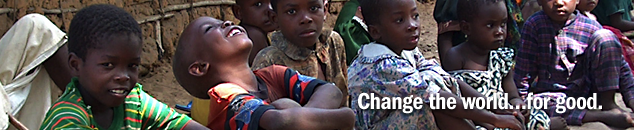
<style>
.page{position:relative;width:634px;height:130px}
.page>*{position:absolute;margin:0}
.t1{font:24px "FranklinGotCdITC-Demi";letter-spacing:-0.025em;color:#ffffff}
</style>
<div class="page">
<p class="t1" style="left:358px;top:92px;width:244px;height:22px">Change the world…for good.</p>
</div>
